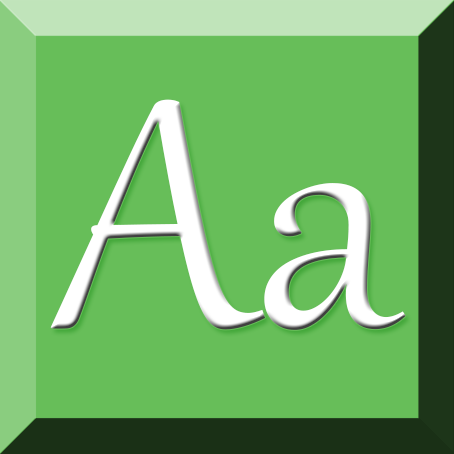
<style>
.page{position:relative;width:454px;height:454px;background:#67be59}
.page>*{position:absolute;margin:0}
.t1{font:400px "Gabriola";color:#ffffff}
</style>
<div class="page">
<p class="t1" style="left:50px;top:99px;width:356px;height:231px">Aa</p>
</div>
